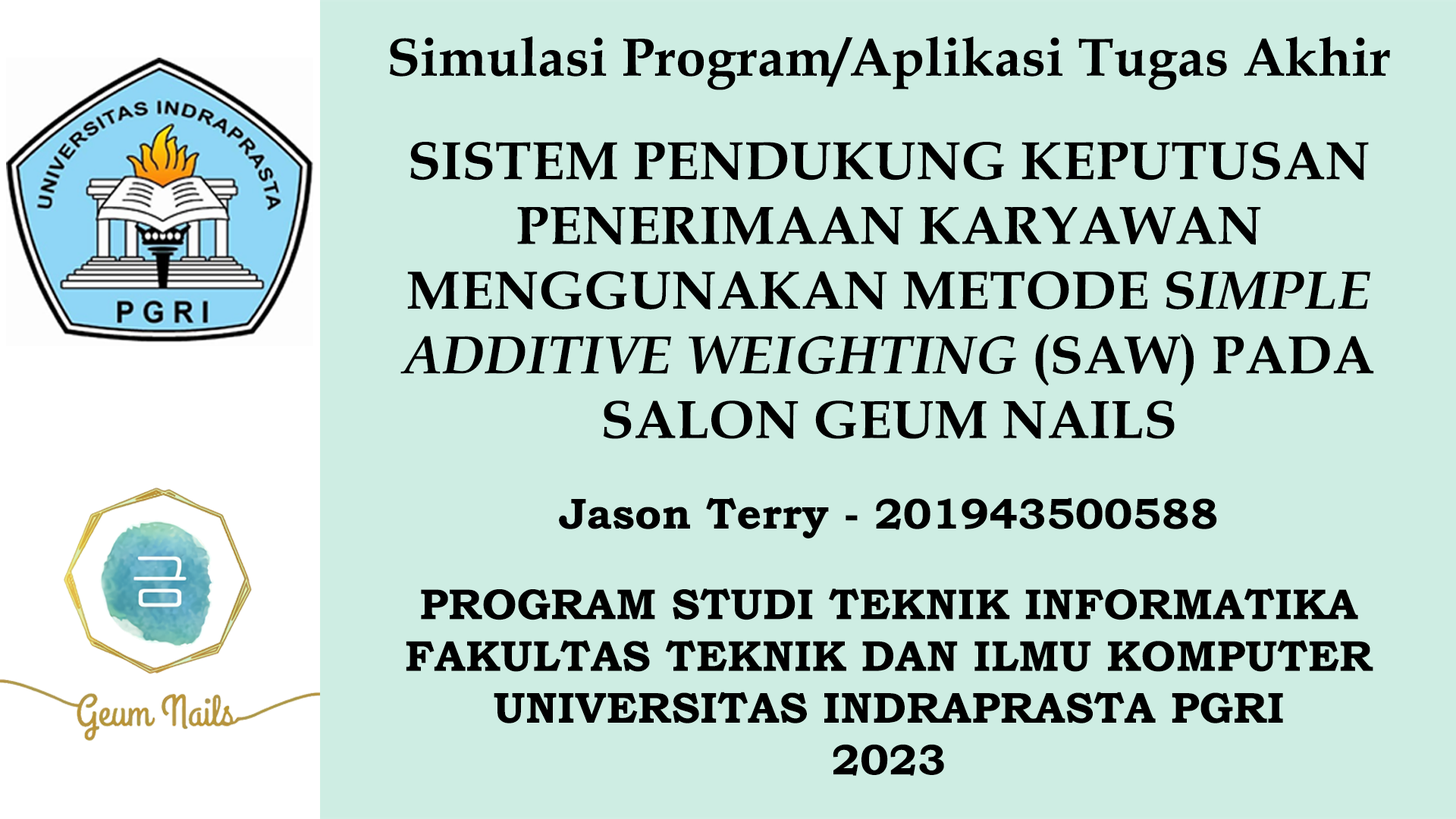
<style>
.page{position:relative;width:1456px;height:819px;background:#ceede3}
.page>*{position:absolute;margin:0}
.t1{font:43.1px "BookmanOldStyle-Bold";letter-spacing:0.005em;color:#000000}
.t2{font:53.9px "BookAntiqua-Bold";letter-spacing:0.005em;color:#000000}
.t3{font:53.9px "BookAntiqua-BoldItalic";letter-spacing:0.005em;color:#000000}
</style>
<div class="page">
<p class="t1" style="left:390px;top:36px;width:1000px;height:740px;text-align:center"><span class="t2">Simulasi Program/Aplikasi Tugas Akhir<br><br>SISTEM PENDUKUNG KEPUTUSAN PENERIMAAN KARYAWAN MENGGUNAKAN METODE S</span><span class="t3">IMPLE ADDITIVE WEIGHTING</span><span class="t2"> (SAW) PADA SALON GEUM NAILS<br><br></span>Jason Terry - 201943500588<br><br>PROGRAM STUDI TEKNIK INFORMATIKA <br>FAKULTAS TEKNIK DAN ILMU KOMPUTER<br>UNIVERSITAS INDRAPRASTA PGRI<br>2023</p>
</div>
